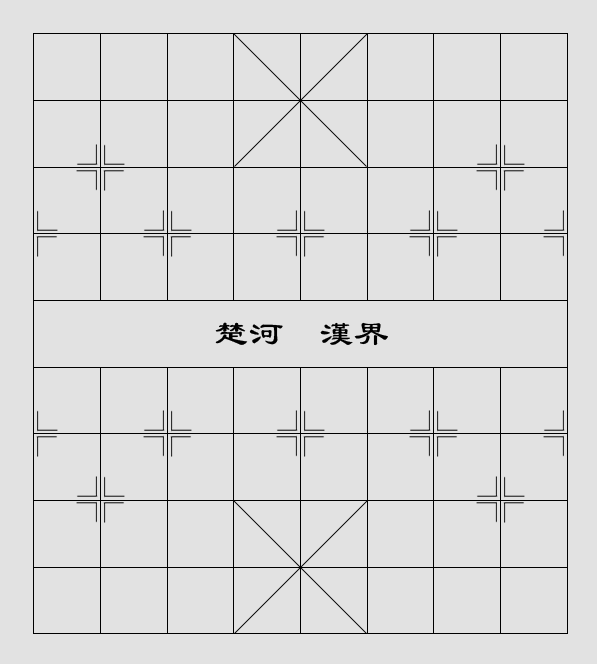
<style>
.page{position:relative;width:597px;height:664px;background:#e2e2e2}
.page>*{position:absolute;margin:0}
.t1{font:34.8px "LiSu";color:#000000}
</style>
<div class="page">
<p class="t1" style="left:215px;top:322px;width:173px;height:24px">楚河  漢界</p>
</div>
